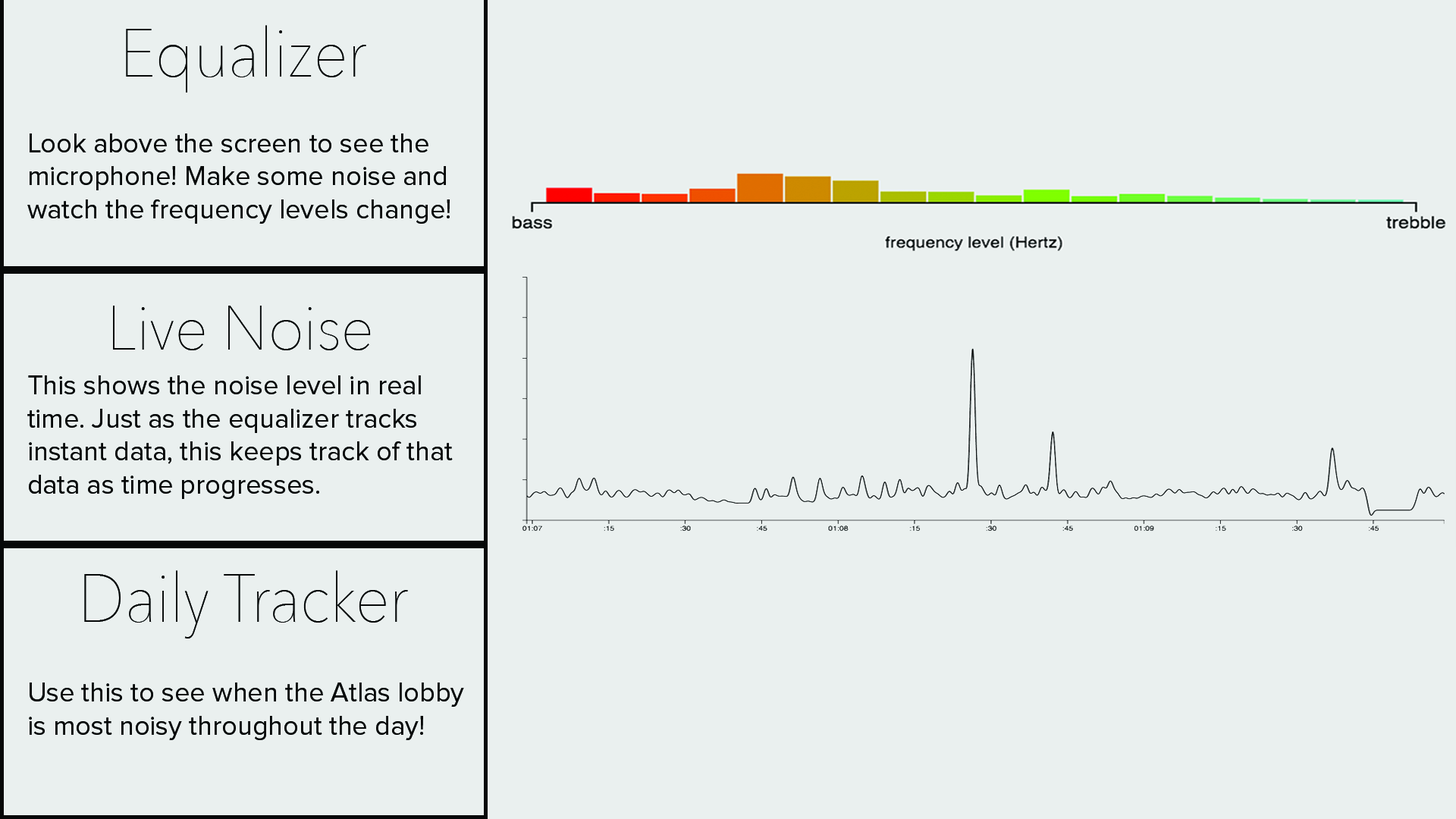
<style>
.page{position:relative;width:1456px;height:819px;background:#eaf0ef}
.page>*{position:absolute;margin:0}
.t1{font:67.3px "AvenirNext-UltraLight";color:#060808;scale:0.9 1}
.t2{font:27.4px "ProximaNova-Regular";color:#060808}
.t3{font:62.5px "AvenirNext-UltraLight";color:#060808;scale:0.94 1}
</style>
<div class="page">
<p class="t1" style="left:126px;top:25px;width:240px;height:68px">Equalizer</p>
<p class="t2" style="left:27px;top:133px;width:423px;height:91px">Look above the screen to see the microphone! Make some noise and watch the frequency levels change!</p>
<p class="t3" style="left:113px;top:306px;width:258px;height:44px">Live Noise</p>
<p class="t2" style="left:27px;top:375px;width:426px;height:124px">This shows the noise level in real time. Just as the equalizer tracks <br>instant data, this keeps track of that data as time progresses.</p>
<p class="t1" style="left:84px;top:570px;width:324px;height:69px">Daily Tracker</p>
<p class="t2" style="left:29px;top:682px;width:435px;height:58px">Use this to see when the Atlas lobby is most noisy throughout the day!</p>
</div>
